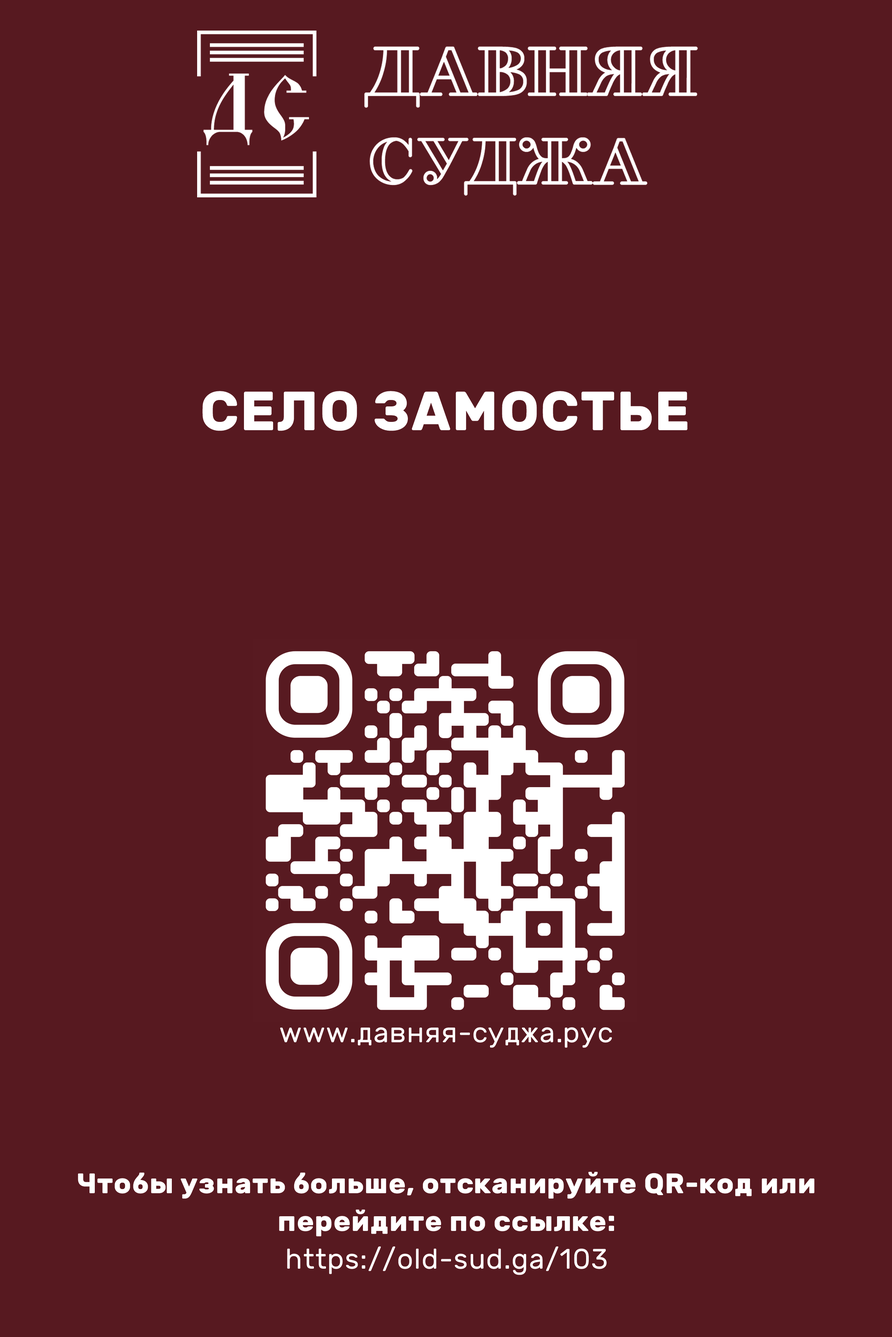
<style>
.page{position:relative;width:892px;height:1337px;background:#571920}
.page>*{position:absolute;margin:0}
.t1{font:55px "Rubik-Bold";letter-spacing:0.025em;color:#ffffff;text-transform:uppercase}
.t2{font:28.3px "Rubik-Regular";letter-spacing:0.025em;color:#ffffff}
.t3{font:28.3px/37.7px "Rubik-Bold";letter-spacing:0.025em;color:#ffffff}
.t4{font:28.3px/37.7px "Rubik-Regular";letter-spacing:0.025em;color:#ffffff}
</style>
<div class="page">
<p class="t1" style="left:202px;top:391px;width:485px;height:40px">село замостье</p>
<p class="t2" style="left:280px;top:1027px;width:332px;height:21px">www.давняя-суджа.рус</p>
<p class="t3" style="left:78px;top:1172px;width:736px;height:103px;text-align:center">Чтобы узнать больше, отсканируйте QR-код или перейдите по ссылке:<br><span class="t4">https://old-sud.ga/103</span></p>
</div>
